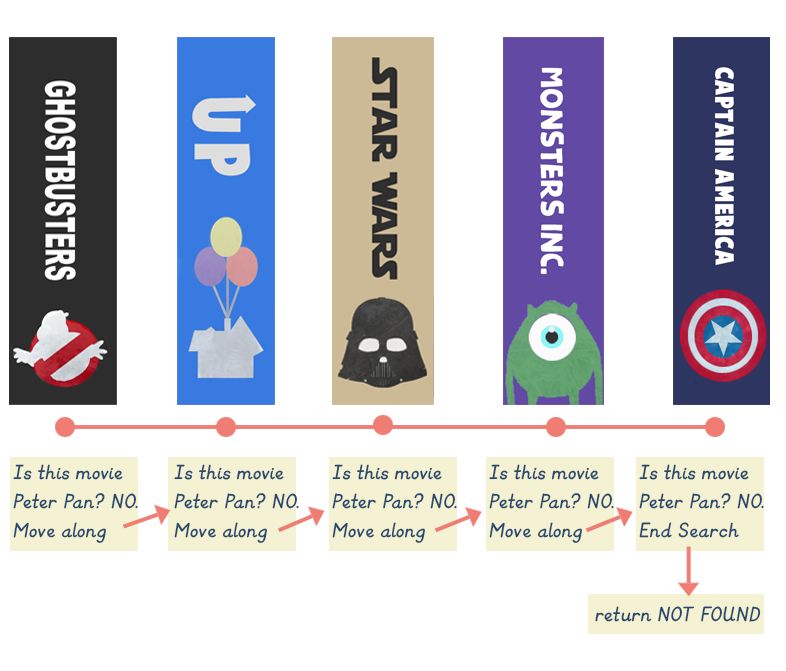
<style>
.page{position:relative;width:786px;height:671px;background:#ffffff}
.page>*{position:absolute;margin:0}
.t1{font:24px "KGPrimaryItalics";color:#28486e}
</style>
<div class="page">
<p class="t1" style="left:13px;top:464px;width:125px;height:79px">Is this movie <br>Peter Pan? NO.<br>Move along</p>
<p class="t1" style="left:174px;top:464px;width:125px;height:79px">Is this movie <br>Peter Pan? NO.<br>Move along</p>
<p class="t1" style="left:332px;top:464px;width:125px;height:79px">Is this movie <br>Peter Pan? NO.<br>Move along</p>
<p class="t1" style="left:489px;top:464px;width:125px;height:79px">Is this movie <br>Peter Pan? NO.<br>Move along</p>
<p class="t1" style="left:639px;top:464px;width:125px;height:74px">Is this movie <br>Peter Pan? NO.<br>End Search</p>
<p class="t1" style="left:595px;top:606px;width:166px;height:16px">return NOT FOUND</p>
</div>
